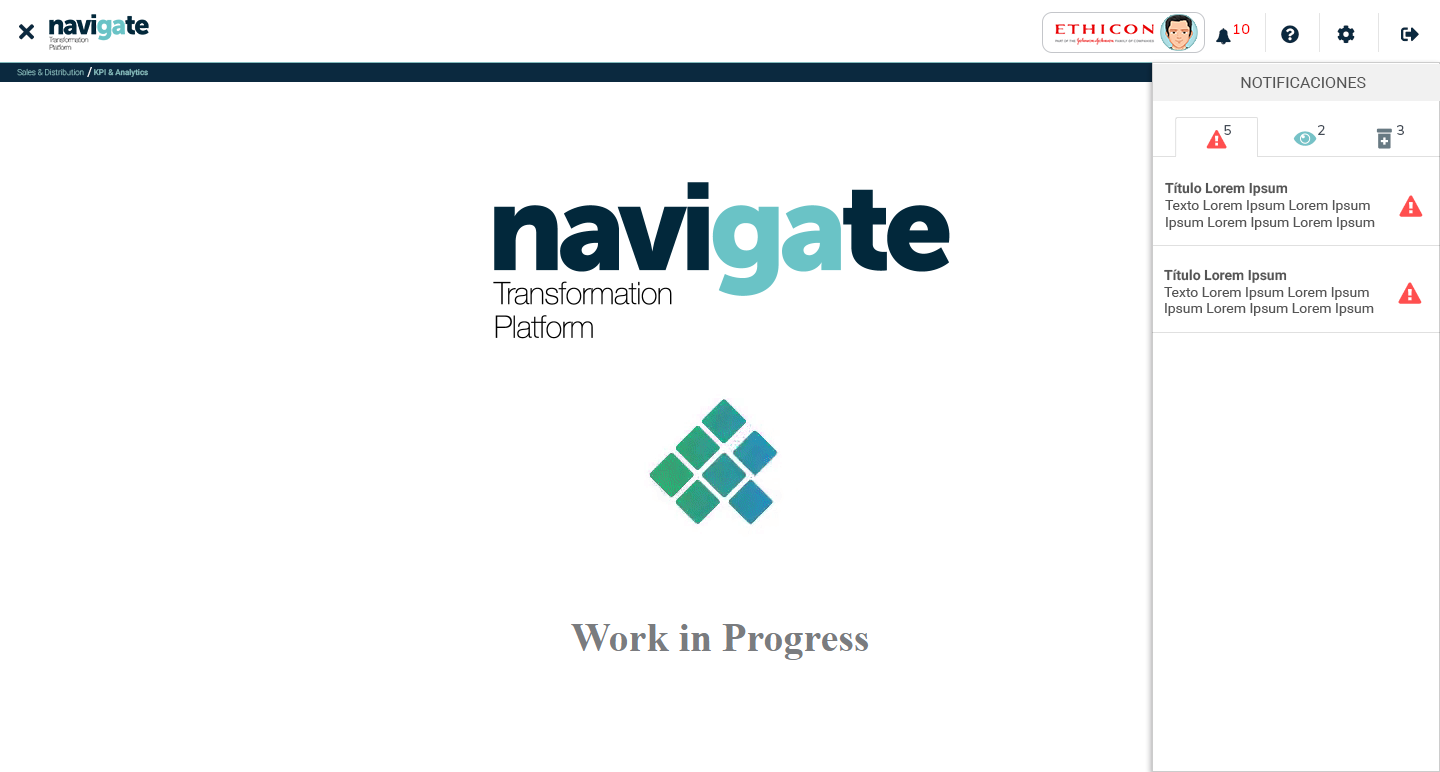
<style>
.page{position:relative;width:1440px;height:772px;background:#ffffff}
.page>*{position:absolute;margin:0}
.t1{font:8px "Roboto-Thin";color:#82babc}
.t2{font:8px "Roboto-Medium";color:#82babc}
.t3{font:12px "Roboto-Regular";color:#ffffff}
.t4{font:16px "Roboto-Regular";color:#555555;text-transform:uppercase}
.t5{font:14px "Roboto-Regular";color:#555555}
.t6{font:14px "Roboto-Bold";color:#555555}
</style>
<div class="page">
<p class="t1" style="left:17px;top:68px;width:131px;height:9px">Sales &amp; Distribution    <span class="t2">KPI &amp; Analytics</span></p>
<p class="t3" style="left:87px;top:67px;width:5px;height:10px">/</p>
<p class="t4" style="left:1241px;top:77px;width:125px;height:11px">Notificaciones</p>
<p class="t5" style="left:1165px;top:182px;width:210px;height:48px"><span class="t6">Título Lorem Ipsum<br></span>Texto Lorem Ipsum Lorem Ipsum<br>Ipsum Lorem Ipsum Lorem Ipsum</p>
<p class="t5" style="left:1164px;top:269px;width:210px;height:47px"><span class="t6">Título Lorem Ipsum<br></span>Texto Lorem Ipsum Lorem Ipsum<br>Ipsum Lorem Ipsum Lorem Ipsum</p>
</div>
